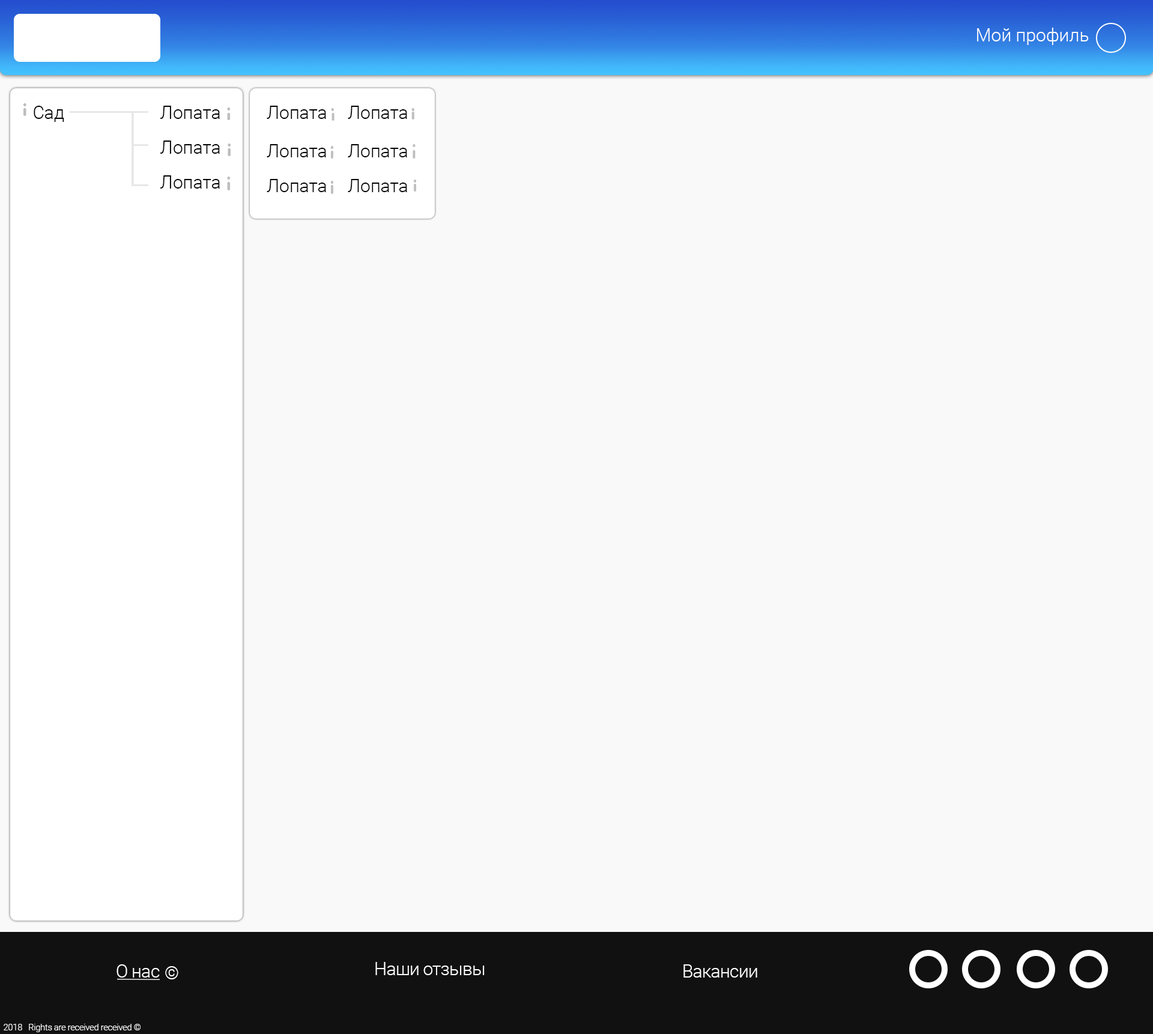
<style>
.page{position:relative;width:1153px;height:1034px;background:#f9f9f9}
.page>*{position:absolute;margin:0}
.t1{font:7.2px "Roboto-Light";color:#ffffff}
.t2{font:18px "Roboto-Light";color:#000000}
.t3{font:7.2px "Roboto-Light";letter-spacing:-0.025em;color:#ffffff}
.t4{font:9px "Roboto-Light";letter-spacing:-0.025em;color:#ffffff}
</style>
<div class="page">
<p class="t1" style="left:977px;top:28px;width:112px;height:17px">Мой профиль</p>
<p class="t2" style="left:34px;top:106px;width:30px;height:16px">Сад</p>
<p class="t2" style="left:160px;top:106px;width:60px;height:13px">Лопата</p>
<p class="t2" style="left:267px;top:106px;width:59px;height:13px">Лопата</p>
<p class="t2" style="left:348px;top:106px;width:59px;height:13px">Лопата</p>
<p class="t2" style="left:160px;top:141px;width:60px;height:13px">Лопата</p>
<p class="t2" style="left:267px;top:144px;width:59px;height:13px">Лопата</p>
<p class="t2" style="left:348px;top:144px;width:59px;height:13px">Лопата</p>
<p class="t2" style="left:160px;top:175px;width:60px;height:14px">Лопата</p>
<p class="t2" style="left:267px;top:179px;width:59px;height:13px">Лопата</p>
<p class="t2" style="left:348px;top:179px;width:59px;height:13px">Лопата</p>
<p class="t3" style="left:117px;top:964px;width:43px;height:14px">О н<span class="t1">ас</span></p>
<p class="t3" style="left:375px;top:962px;width:110px;height:13px">Наши отзывы</p>
<p class="t3" style="left:683px;top:964px;width:74px;height:14px">Вакансии</p>
<p class="t1" style="left:165px;top:966px;width:13px;height:13px">©</p>
<p class="t4" style="left:4px;top:1024px;width:18px;height:7px">2018</p>
<p class="t4" style="left:29px;top:1024px;width:112px;height:8px">Rights are received received © <span class="t1">©©©©</span></p>
</div>
